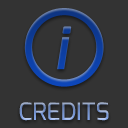
<style>
.page{position:relative;width:128px;height:128px;background:#333333}
.page>*{position:absolute;margin:0}
.t1{font:24px "Exo-Medium";text-transform:uppercase}
</style>
<div class="page">
<p class="t1" style="left:19px;top:102px;width:90px;height:19px">Credits</p>
</div>
